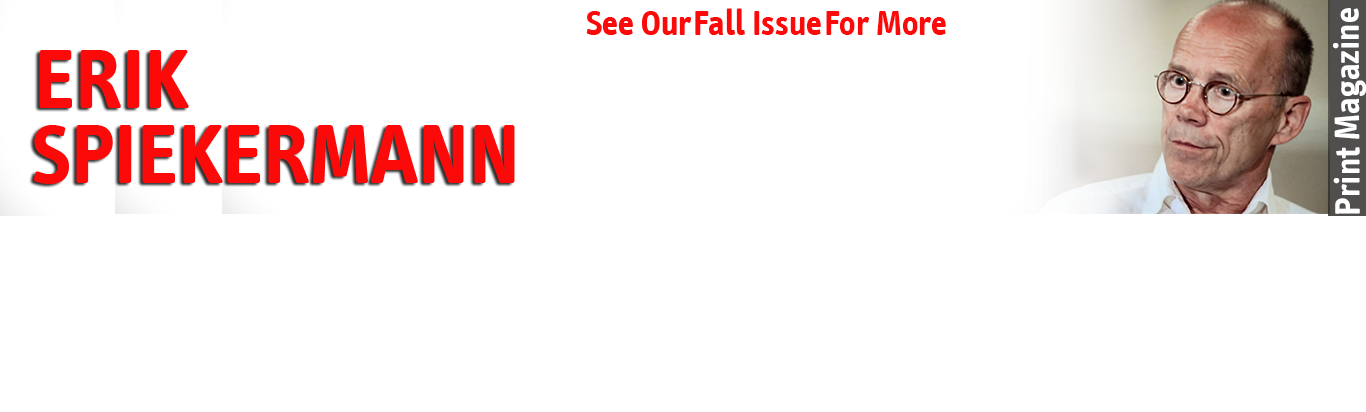
<style>
.page{position:relative;width:1366px;height:412px;background:#ffffff}
.page>*{position:absolute;margin:0}
.t1{font:36px "InfoText-Bold";color:#fb0a0a}
.t2{font:36px "InfoText-Bold";color:#fc0a0a}
.t3{font:36px "InfoText-Bold";color:#ffffff}
.t4{font:85px "InfoText-Bold";color:#fc0a0a}
</style>
<div class="page">
<p class="t1" style="left:586px;top:11px;width:105px;height:24px">See Our</p>
<p class="t2" style="left:695px;top:8px;width:126px;height:27px">Fall Issue</p>
<p class="t2" style="left:826px;top:11px;width:120px;height:24px">For More</p>
<p class="t3" style="left:1333px;top:8px;width:34px;height:206px;rotate:-90deg">Print Magazine</p>
<p class="t4" style="left:39px;top:50px;width:150px;height:58px">ERIK</p>
<p class="t4" style="left:34px;top:125px;width:481px;height:59px">SPIEKERMANN</p>
</div>
